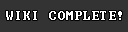
<style>
.page{position:relative;width:128px;height:32px;background:#333333}
.page>*{position:absolute;margin:0}
.t1{font:12px "Terminal";letter-spacing:0.1em;color:#ffffff}
</style>
<div class="page">
<p class="t1" style="left:6px;top:11px;width:116px;height:9px">WIKI COMPLETE!</p>
</div>
